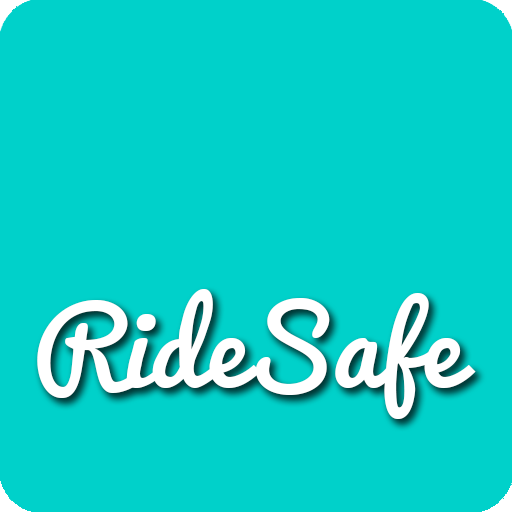
<style>
.page{position:relative;width:512px;height:512px;background:#00d1ca}
.page>*{position:absolute;margin:0}
.t1{font:105px "Pacifico";color:#ffffff}
</style>
<div class="page">
<p class="t1" style="left:37px;top:289px;width:439px;height:130px">RideSafe</p>
</div>
